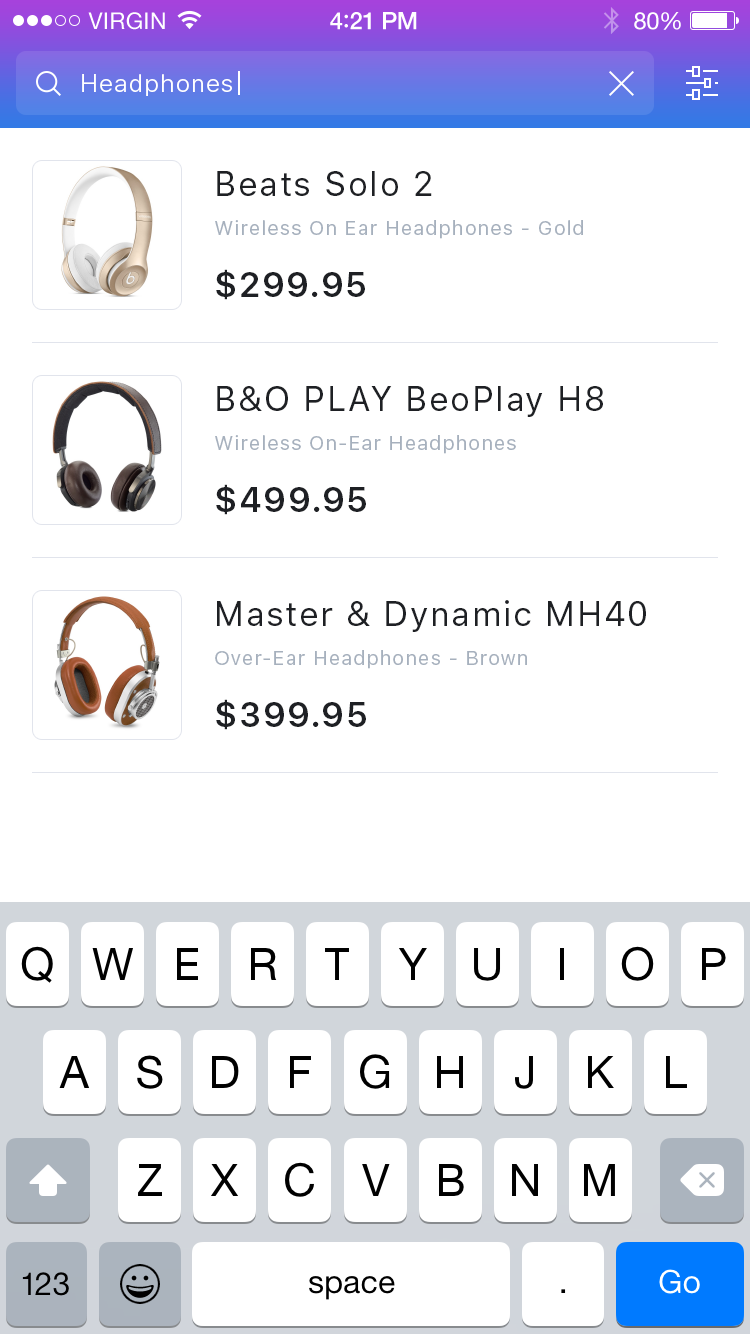
<style>
.page{position:relative;width:750px;height:1334px;background:#ffffff}
.page>*{position:absolute;margin:0}
.t1{font:24px "SFUIText-Light";letter-spacing:0.05em;color:#ffffff}
.t2{font:34px "SFUIText-Regular";letter-spacing:0.05em;color:#1e2024}
.t3{font:20px "SFUIText-Regular";letter-spacing:0.05em;color:#a6b0bd}
.t4{font:34px "SFUIText-Semibold";letter-spacing:0.05em;color:#1e2024}
</style>
<div class="page">
<p class="t1" style="left:82px;top:74px;width:150px;height:22px">Headphones</p>
<p class="t2" style="left:217px;top:171px;width:215px;height:25px">Beats Solo 2</p>
<p class="t3" style="left:215px;top:220px;width:368px;height:19px">Wireless On Ear Headphones - Gold</p>
<p class="t4" style="left:216px;top:269px;width:149px;height:31px">$299.95</p>
<p class="t2" style="left:217px;top:386px;width:386px;height:31px">B&amp;O PLAY BeoPlay H8</p>
<p class="t3" style="left:215px;top:435px;width:301px;height:19px">Wireless On-Ear Headphones</p>
<p class="t4" style="left:216px;top:484px;width:150px;height:31px">$499.95</p>
<p class="t2" style="left:217px;top:600px;width:429px;height:32px">Master &amp; Dynamic MH40</p>
<p class="t3" style="left:215px;top:650px;width:312px;height:19px">Over-Ear Headphones - Brown</p>
<p class="t4" style="left:216px;top:699px;width:150px;height:31px">$399.95</p>
</div>
